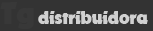
<style>
.page{position:relative;width:153px;height:31px;background:#333333}
.page>*{position:absolute;margin:0}
.t1{font:30px "November";color:#383838}
.t2{font:18px "November";color:#d0d0d0}
</style>
<div class="page">
<p class="t1" style="left:0px;top:2px;width:34px;height:27px">Tg</p>
<p class="t2" style="left:38px;top:11px;width:110px;height:13px">distribuidora</p>
</div>
